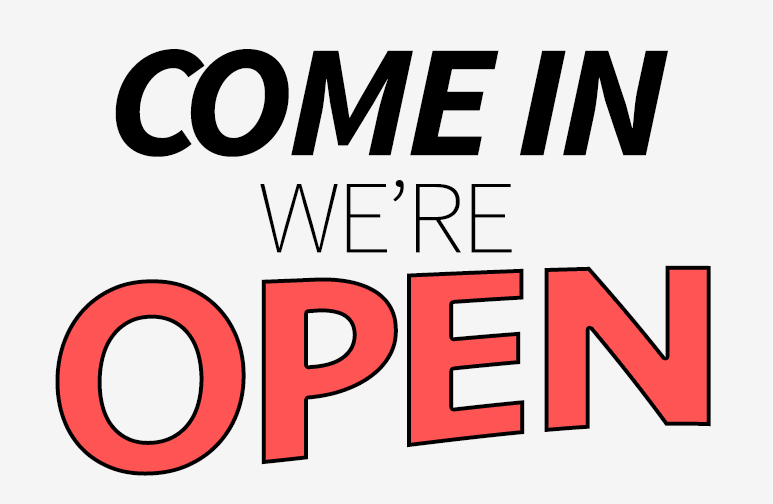
<style>
.page{position:relative;width:773px;height:504px;background:#f5f5f5}
.page>*{position:absolute;margin:0}
.t1{font:159.8px "SourceSansPro-BoldIt";letter-spacing:-0.04em;color:#000000;scale:1.06 1}
.t2{font:103.4px "SourceSansPro-ExtraLight";letter-spacing:-0.04em;color:#000000;scale:1.06 1}
.t3{font:263.2px "Seravek-Bold";letter-spacing:-0.04em;color:#ff5454;scale:1.06 1}
</style>
<div class="page">
<p class="t1" style="left:115px;top:49px;width:553px;height:108px">COME IN</p>
<p class="t2" style="left:260px;top:180px;width:252px;height:73px">WE’RE</p>
<p class="t3" style="left:55px;top:265px;width:656px;height:211px">OPEN</p>
</div>
